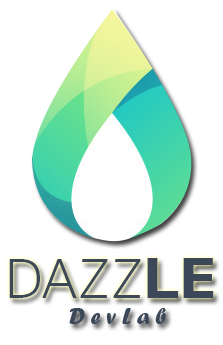
<style>
.page{position:relative;width:223px;height:345px;background:#ffffff}
.page>*{position:absolute;margin:0}
.t1{font:60px "Dubai-Light";color:#3c4858}
.t2{font:58.7px "GillSansMT-Bold";color:#3c4858}
.t3{font:22.7px "ForteMT";color:#3c4858}
</style>
<div class="page">
<p class="t1" style="left:9px;top:258px;width:205px;height:40px">DAZZ<span class="t2">LE</span></p>
<p class="t3" style="left:69px;top:308px;width:97px;height:16px">D e v L a b</p>
</div>
